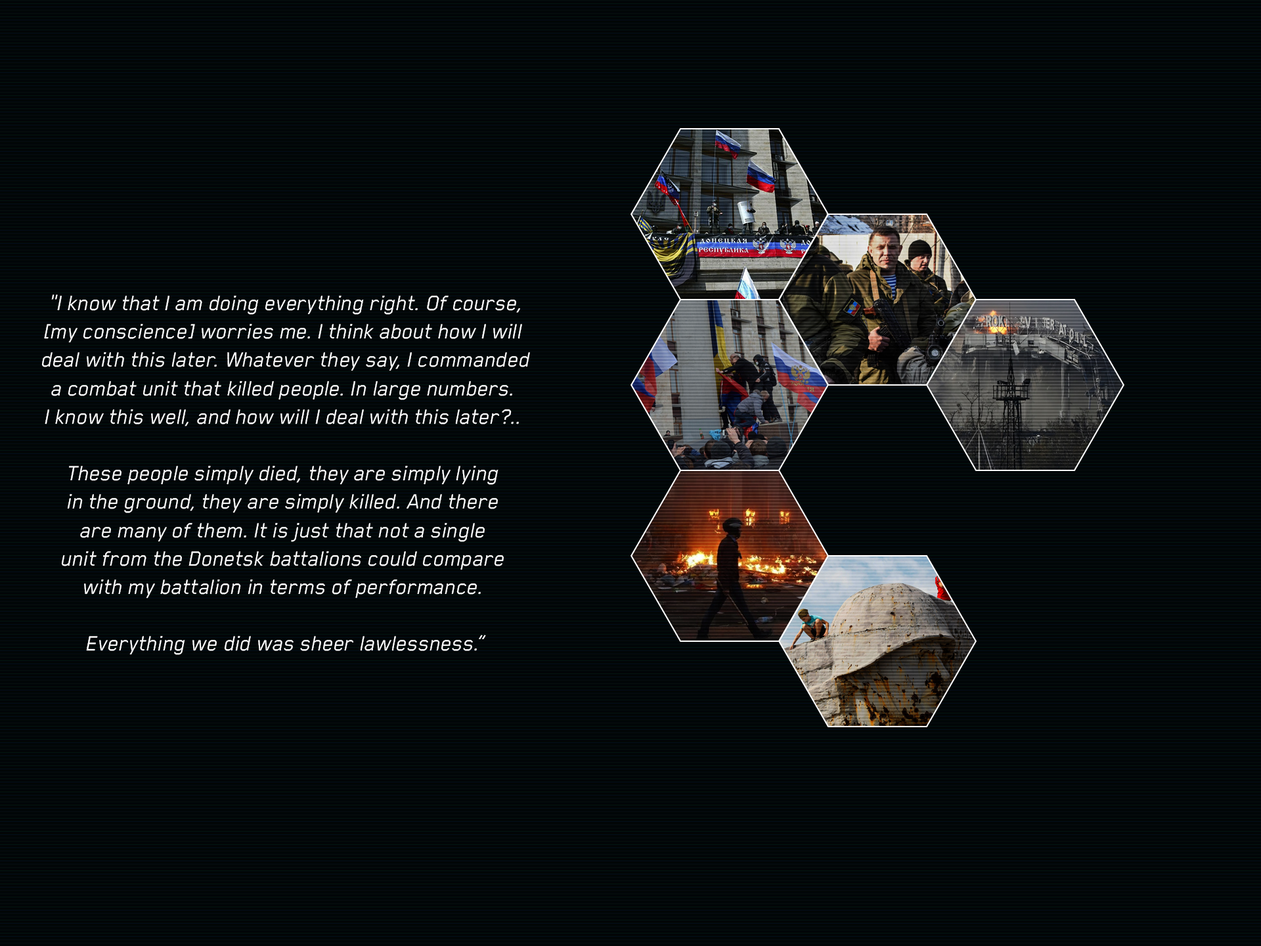
<style>
.page{position:relative;width:1261px;height:946px}
.page>*{position:absolute;margin:0}
.t1{font:23.6px "BlenderPro-BookItalic";color:#ffffff}
</style>
<div class="page">
<p class="t1" style="left:41px;top:294px;width:489px;height:361px;text-align:center">"I know that I am doing everything right. Of course,<br>[my conscience] worries me. I think about how I will <br>deal with this later. Whatever they say, I commanded<br>a combat unit that killed people. In large numbers. <br>I know this well, and how will I deal with this later?.. <br><br>These people simply died, they are simply lying <br>in the ground, they are simply killed. And there <br>are many of them. It is just that not a single <br>unit from the Donetsk battalions could compare <br>with my battalion in terms of performance. <br><br>Everything we did was sheer lawlessness.”</p>
</div>
